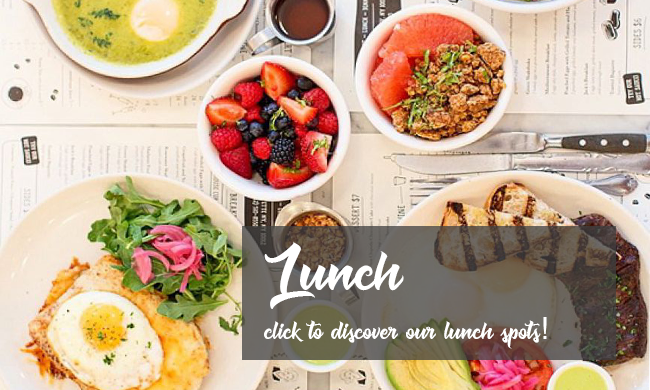
<style>
.page{position:relative;width:650px;height:390px}
.page>*{position:absolute;margin:0}
.t1{font:70px "Muskaters";color:#ffffff}
.t2{font:30px "Muskaters";color:#ffffff}
.t3{font:30px "Helvetica";color:#ffffff}
</style>
<div class="page">
<p class="t1" style="left:264px;top:241px;width:140px;height:68px">Lunch</p>
<p class="t2" style="left:264px;top:317px;width:283px;height:32px">click to discover our lunch spots<span class="t3">!</span></p>
</div>
